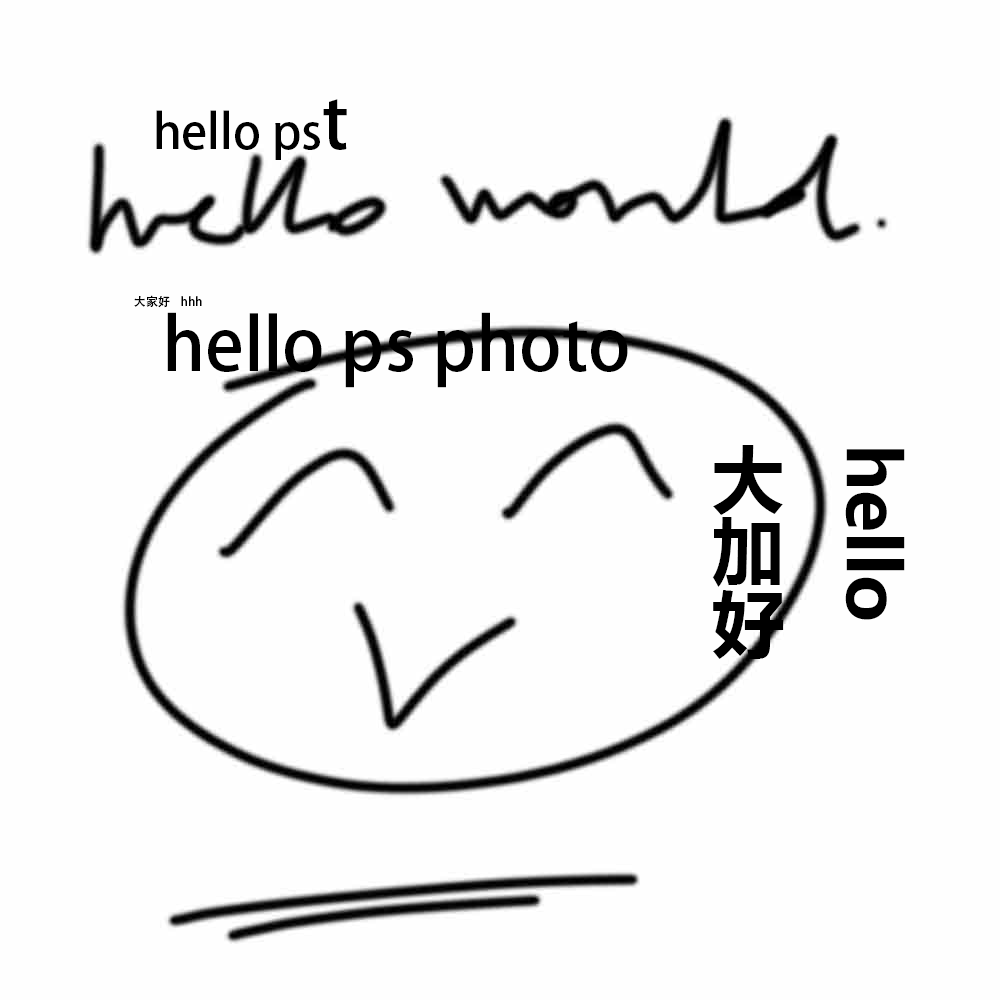
<style>
.page{position:relative;width:1000px;height:1000px;background:#fefefe}
.page>*{position:absolute;margin:0}
.t1{font:48px "AdobeHeitiStd-Regular";color:#000000}
.t2{font:72px "AdobeHeitiStd-Regular";color:#000000}
.t3{font:12px "AdobeHeitiStd-Regular";color:#000000}
.t4{font:72px "MicrosoftYaHei-Bold";color:#000000}
</style>
<div class="page">
<p class="t1" style="left:156px;top:99px;width:191px;height:61px">hello ps<span class="t2">t</span></p>
<p class="t3" style="left:134px;top:295px;width:68px;height:13px">大家好    hhh</p>
<p class="t2" style="left:167px;top:312px;width:461px;height:76px">hello ps photo</p>
<p class="t4" style="left:712px;top:445px;width:193px;height:214px">hello<br>大加好</p>
</div>
